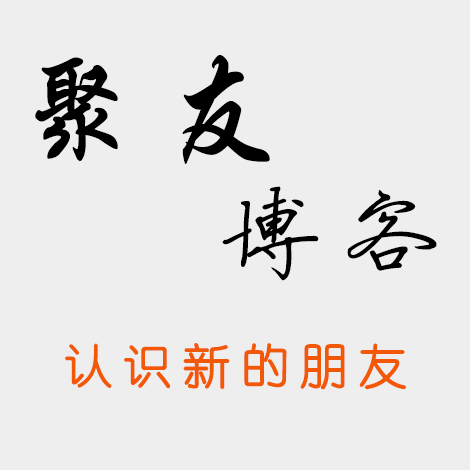
<style>
.page{position:relative;width:470px;height:470px;background:#eeeeee}
.page>*{position:absolute;margin:0}
.t1{font:120.2px "STXingkai";letter-spacing:0.2em;color:#000000}
.t2{font:100.2px "FZYBXSFW--GB1-0";letter-spacing:0.2em;color:#000000}
.t3{font:48px "YouYuan";letter-spacing:0.2em;color:#f25805;font-weight:bold}
</style>
<div class="page">
<p class="t1" style="left:35px;top:55px;width:235px;height:109px">聚友</p>
<p class="t2" style="left:222px;top:186px;width:215px;height:95px">博客</p>
<p class="t3" style="left:64px;top:343px;width:342px;height:47px">认识新的朋友</p>
</div>
